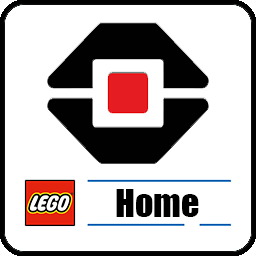
<style>
.page{position:relative;width:256px;height:256px;background:#ffffff}
.page>*{position:absolute;margin:0}
.t1{font:36px "Impact";color:#000000}
</style>
<div class="page">
<p class="t1" style="left:116px;top:189px;width:83px;height:28px">Home</p>
</div>
